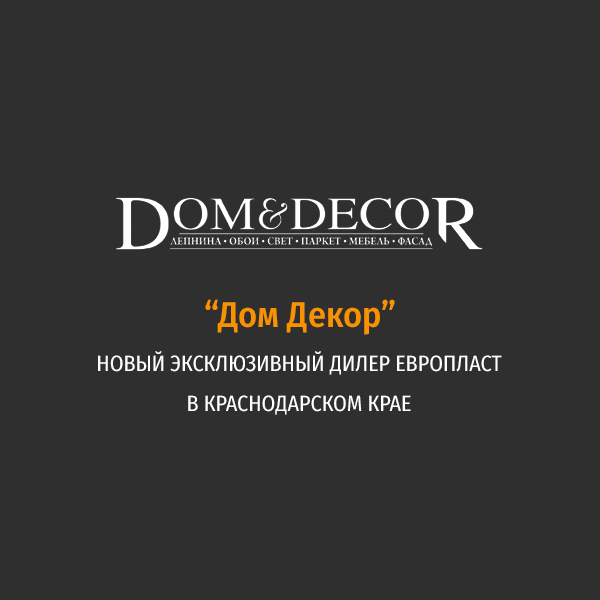
<style>
.page{position:relative;width:600px;height:600px;background:#2f2f2f}
.page>*{position:absolute;margin:0}
.t1{font:36px "FiraSansCondensed-Medium";color:#f89200}
.t2{font:22px/40px "FiraSansCondensed-Regular";color:#ffffff;text-transform:uppercase}
.t3{font:22px/40px "FiraSansCondensed-Regular";color:#ffffff}
</style>
<div class="page">
<p class="t1" style="left:205px;top:299px;width:190px;height:36px">“Дом Декор”</p>
<p class="t2" style="left:98px;top:351px;width:404px;height:64px;text-align:center"><span class="t3">Н</span>ОВЫЙ эксклюзивный ДИЛЕР европласт<br>в КРАСНОДАрСКОМ КРАЕ</p>
</div>
